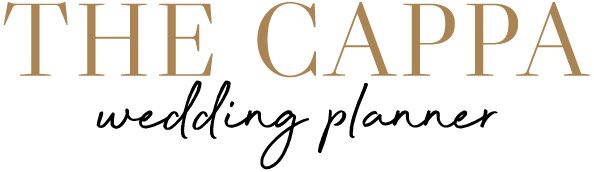
<style>
.page{position:relative;width:594px;height:172px;background:#ffffff}
.page>*{position:absolute;margin:0}
.t1{font:104px "LibreCaslonDisplay-Regular";letter-spacing:0.04em;color:#aa8453}
.t2{font:90px "BeyondInfinity";color:#000000}
</style>
<div class="page">
<p class="t1" style="left:3px;top:2px;width:587px;height:76px">THE CAPPA</p>
<p class="t2" style="left:96px;top:80px;width:402px;height:90px">wedding planner</p>
</div>
